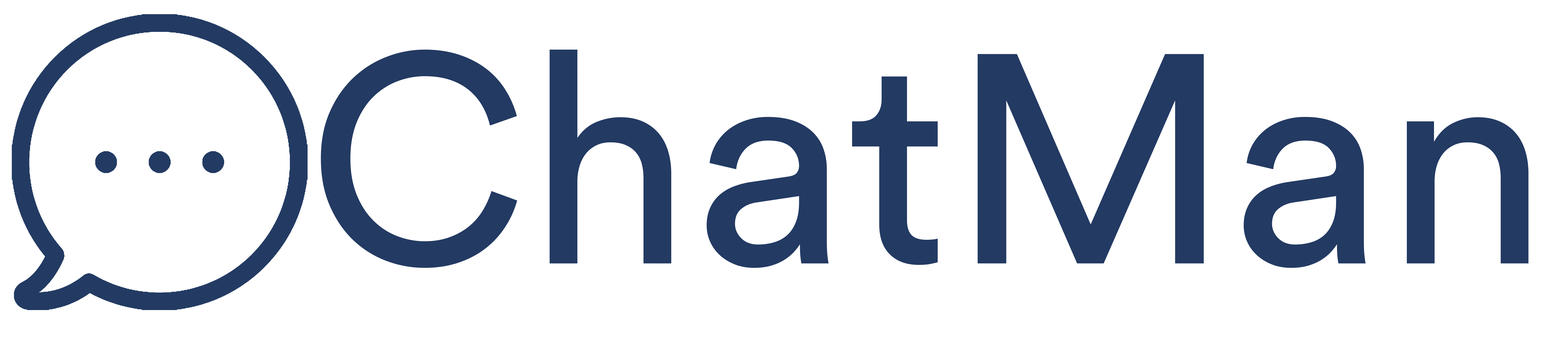
<style>
.page{position:relative;width:1568px;height:339px;background:#ffffff}
.page>*{position:absolute;margin:0}
.t1{font:295.2px "Circular-Book";color:#233a63}
</style>
<div class="page">
<p class="t1" style="left:321px;top:50px;width:1207px;height:218px">ChatMan</p>
</div>
